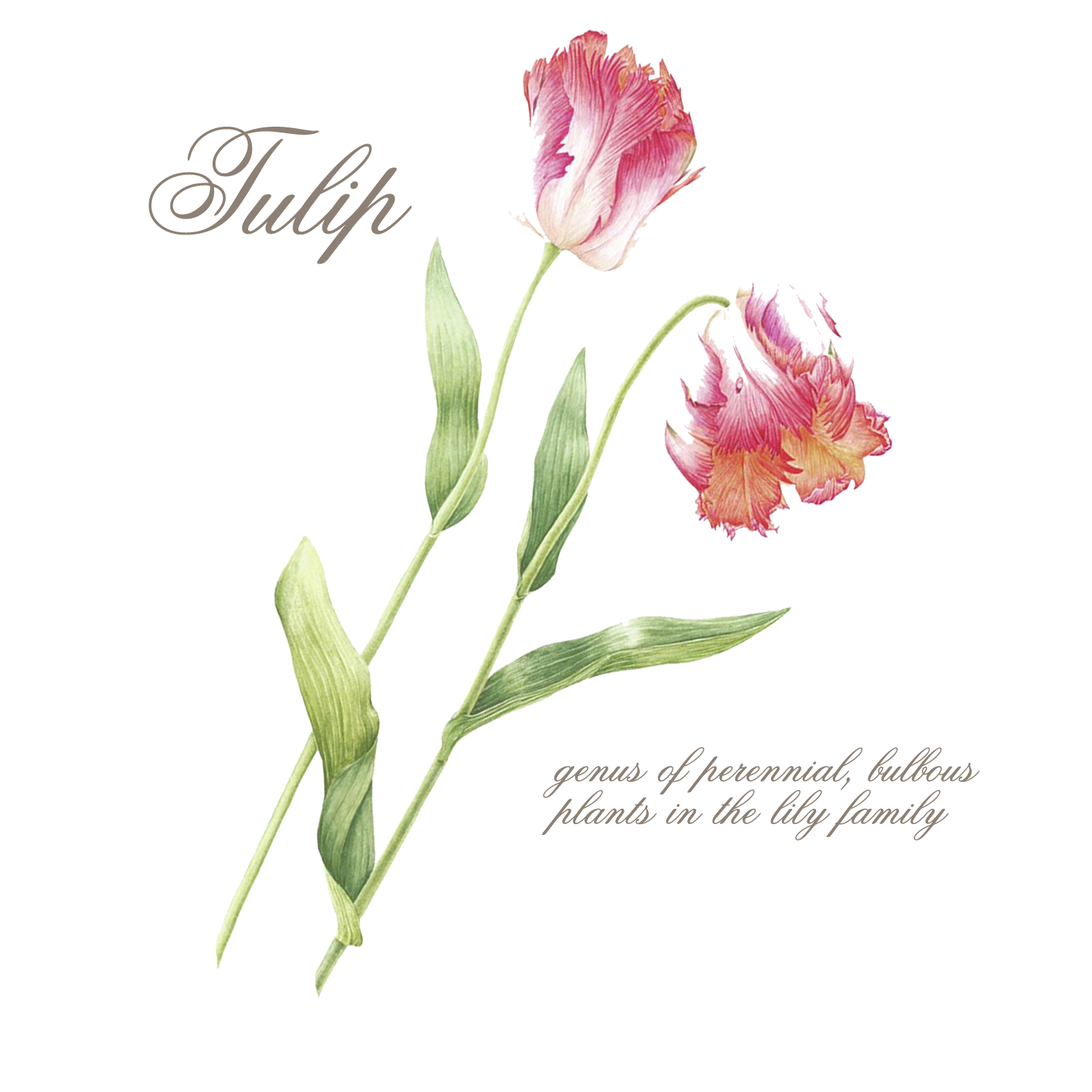
<style>
.page{position:relative;width:1092px;height:1092px;background:#ffffff}
.page>*{position:absolute;margin:0}
.t1{font:145.6px "Old-Scrip";color:#8d8074}
.t2{font:54.6px/42.5px "Old-Scrip";color:#8d8074}
</style>
<div class="page">
<p class="t1" style="left:149px;top:127px;width:263px;height:137px">Tulip</p>
<p class="t2" style="left:542px;top:747px;width:438px;height:94px">genus of perennial, bulbous <br>plants in the lily family</p>
</div>
